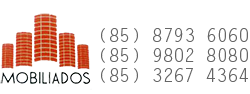
<style>
.page{position:relative;width:250px;height:94px;background:#ffffff}
.page>*{position:absolute;margin:0}
.t1{font:18px "LetterGothicStd";color:#666666}
</style>
<div class="page">
<p class="t1" style="left:101px;top:28px;width:147px;height:15px">6060 8793 (85)</p>
<p class="t1" style="left:101px;top:48px;width:147px;height:15px">8080 9802 (85)</p>
<p class="t1" style="left:101px;top:68px;width:147px;height:15px">4364 3267 (85)</p>
</div>
